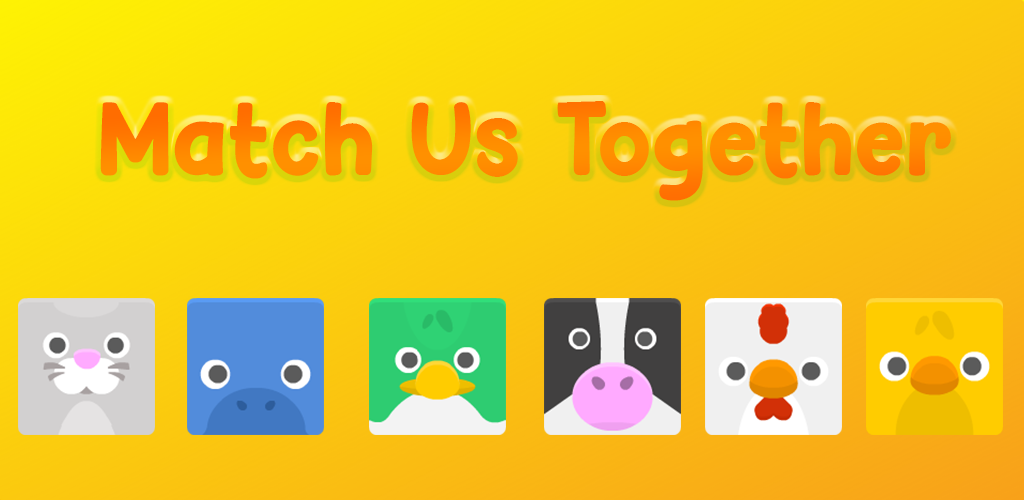
<style>
.page{position:relative;width:1024px;height:500px}
.page>*{position:absolute;margin:0}
.t1{font:97.1px "Hey-Comic";color:#ff8800}
</style>
<div class="page">
<p class="t1" style="left:100px;top:101px;width:851px;height:100px">Match Us Together</p>
</div>
